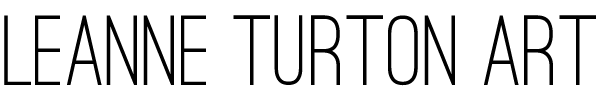
<style>
.page{position:relative;width:600px;height:100px;background:#ffffff}
.page>*{position:absolute;margin:0}
.t1{font:103px "OstrichSans-Medium";color:#000000}
</style>
<div class="page">
<p class="t1" style="left:4px;top:15px;width:592px;height:71px">leanne turton art</p>
</div>
